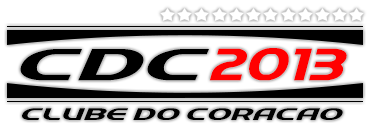
<style>
.page{position:relative;width:373px;height:129px;background:#ffffff}
.page>*{position:absolute;margin:0}
.t1{font:49.2px "QuickExpress";color:#000000;scale:1.25 1}
.t2{font:49.2px "QuickExpress";color:#ff0000;scale:0.75 1}
.t3{font:18.3px "QuickExpress";color:#010101;scale:1.15 1}
</style>
<div class="page">
<p class="t1" style="left:20px;top:49px;width:189px;height:32px">CDC</p>
<p class="t2" style="left:209px;top:48px;width:138px;height:33px">2013</p>
<p class="t3" style="left:22px;top:108px;width:321px;height:12px">CLUBE DO CORACAO</p>
</div>
